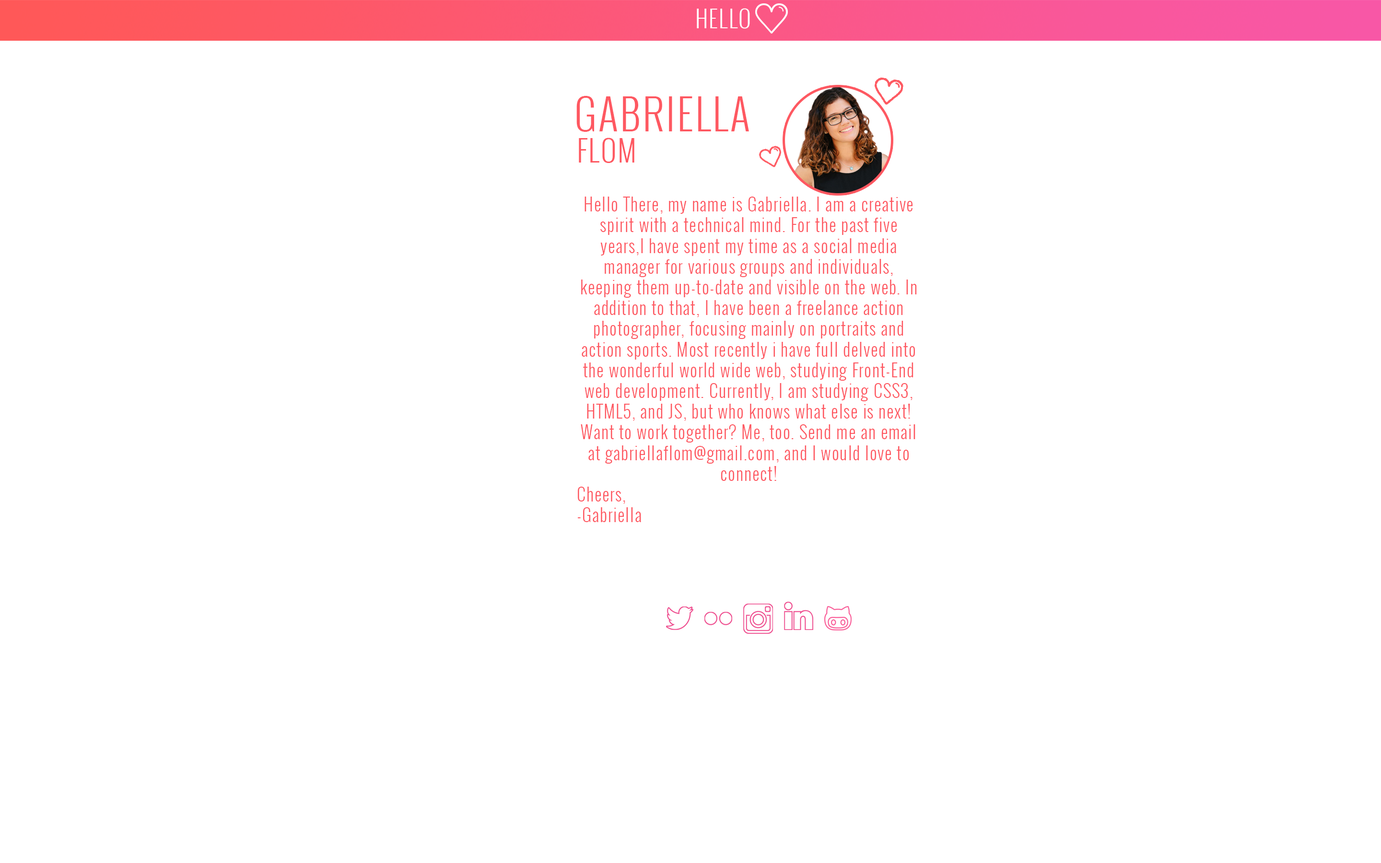
<style>
.page{position:relative;width:1381px;height:863px;background:#ffffff}
.page>*{position:absolute;margin:0}
.t1{font:23px "Oswald-Light";letter-spacing:0.05em;color:#ffffff}
.t2{font:41.2px "Oswald-Light";letter-spacing:0.05em;color:#fe5861}
.t3{font:28.8px "Oswald-Light";letter-spacing:0.05em;color:#fe5861}
.t4{font:17.3px "Oswald-Light";letter-spacing:0.05em;color:#fe5861}
</style>
<div class="page">
<p class="t1" style="left:697px;top:8px;width:53px;height:21px">HELLO</p>
<p class="t2" style="left:576px;top:96px;width:173px;height:36px">GABRIELLA</p>
<p class="t3" style="left:579px;top:138px;width:56px;height:25px">FLOM</p>
<p class="t4" style="left:578px;top:197px;width:339px;height:325px;text-align:center">Hello There, my name is Gabriella. I am a creative spirit with a technical mind. For the past five years,I have spent my time as a social media manager for various groups and individuals, keeping them up-to-date and visible on the web. In addition to that, I have been a freelance action photographer, focusing mainly on portraits and action sports. Most recently i have full delved into the wonderful world wide web, studying Front-End web development. Currently, I am studying CSS3, HTML5, and JS, but who knows what else is next! Want to work together? Me, too. Send me an email at gabriellaflom@gmail.com, and I would love to connect!<br>Cheers, <br>-Gabriella</p>
</div>
